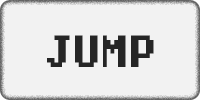
<style>
.page{position:relative;width:200px;height:100px;background:#f2f2f2}
.page>*{position:absolute;margin:0}
.t1{font:36px "Super-Mario-World";letter-spacing:0.02em;color:#252525;text-transform:uppercase;scale:0.83 1}
</style>
<div class="page">
<p class="t1" style="left:47px;top:35px;width:107px;height:32px">JUMP</p>
</div>
